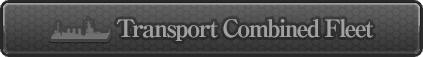
<style>
.page{position:relative;width:423px;height:57px}
.page>*{position:absolute;margin:0}
.t1{font:24px "RyuminPro-ExBold";letter-spacing:-0.08em;color:#a1a1a1}
</style>
<div class="page">
<p class="t1" style="left:116px;top:19px;width:258px;height:22px">Transport Combined Fleet</p>
</div>
